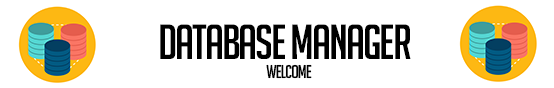
<style>
.page{position:relative;width:554px;height:88px;background:#ffffff}
.page>*{position:absolute;margin:0}
.t1{font:48px "BigNoodleTitling";letter-spacing:-0.04em;color:#000000;scale:1.03 1}
.t2{font:18px "BigNoodleTitling";letter-spacing:-0.04em;color:#000000;scale:1.03 1}
</style>
<div class="page">
<p class="t1" style="left:160px;top:24px;width:251px;height:35px">Database manager</p>
<p class="t2" style="left:266px;top:64px;width:46px;height:15px">Welcome</p>
</div>
